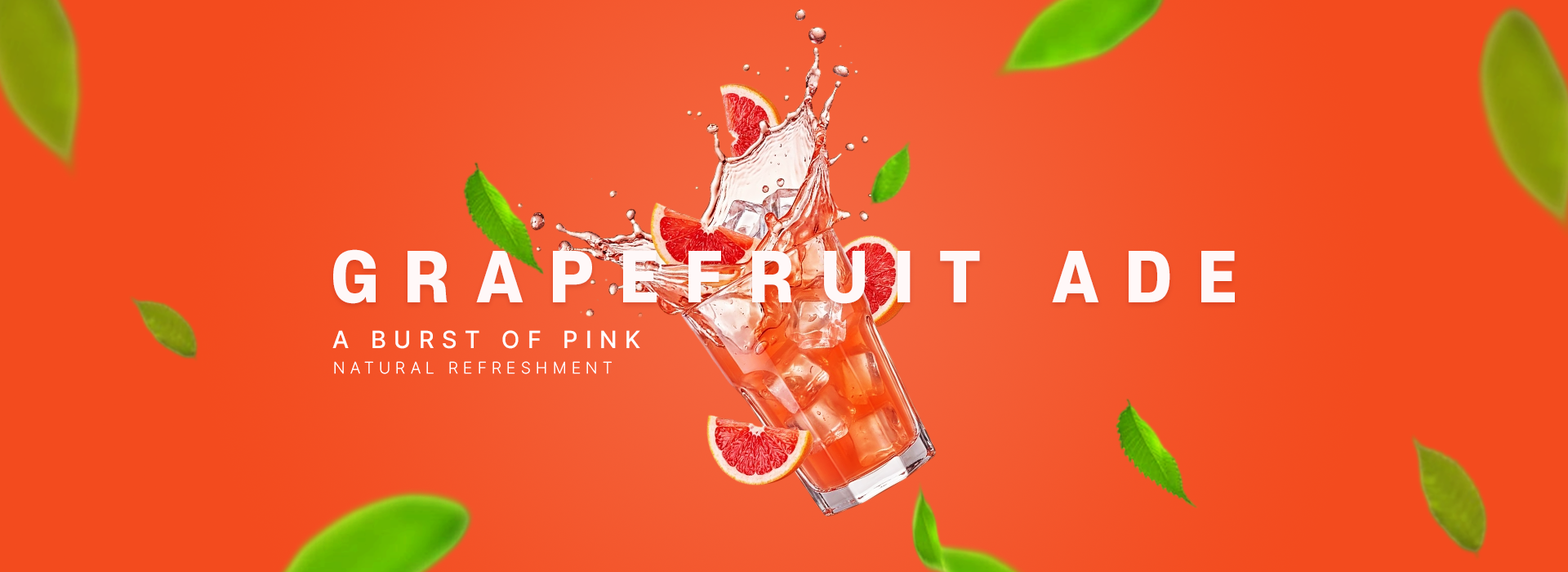
<style>
.page{position:relative;width:1568px;height:572px;background:#f34b1e}
.page>*{position:absolute;margin:0}
.t1{font:65.3px "S-CoreDream-8Heavy";letter-spacing:0.4em;color:#fff8f8}
.t2{font:24.5px "Pretendard-Medium";letter-spacing:0.32em;color:#ffffff}
.t3{font:16.3px "Pretendard-ExtraLight";letter-spacing:0.32em;color:#ffffff}
</style>
<div class="page">
<p class="t1" style="left:333px;top:249px;width:902px;height:55px">GRAPEFRUIT ADE</p>
<p class="t2" style="left:332px;top:330px;width:308px;height:19px">A BURST OF PINK</p>
<p class="t3" style="left:334px;top:361px;width:278px;height:13px">NATURAL REFRESHMENT</p>
</div>
